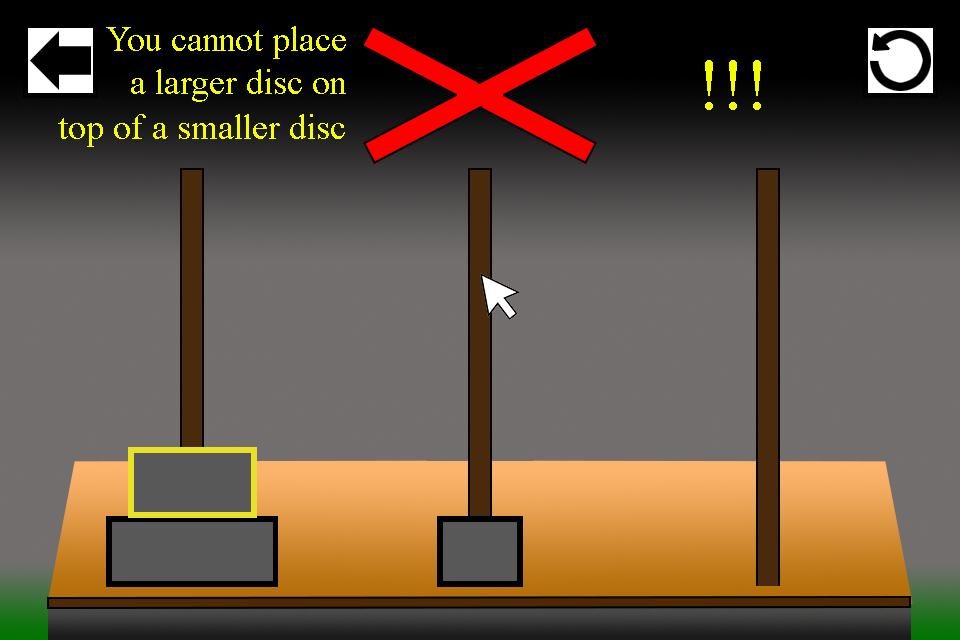
<style>
.page{position:relative;width:960px;height:640px}
.page>*{position:absolute;margin:0}
.t1{font:36px "TimesNewRomanPSMT";color:#f6ff00}
.t2{font:72px "TimesNewRomanPSMT";color:#f6ff00}
</style>
<div class="page">
<p class="t1" style="left:106px;top:26px;width:240px;height:33px">You cannot place</p>
<p class="t2" style="left:705px;top:60px;width:56px;height:50px">!!!</p>
<p class="t1" style="left:131px;top:69px;width:215px;height:33px">a larger disc on</p>
<p class="t1" style="left:58px;top:114px;width:287px;height:33px">top of a smaller disc</p>
</div>
